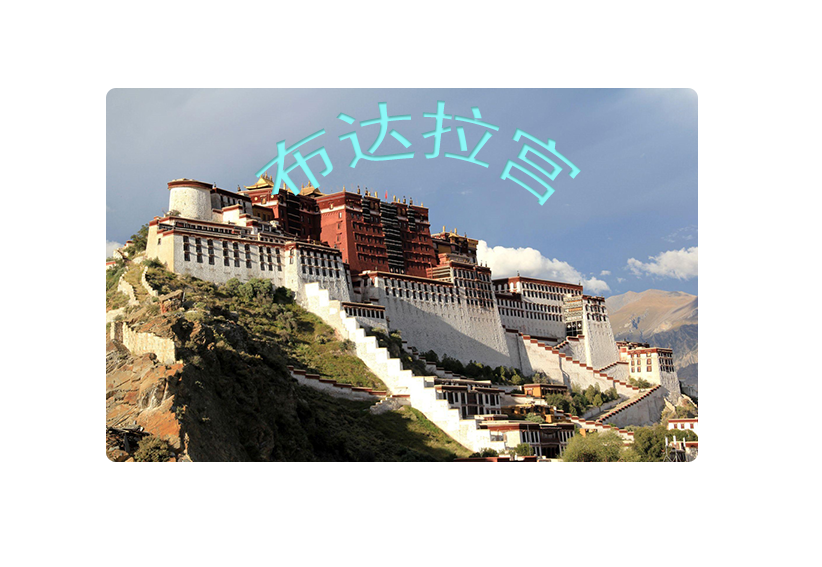
<style>
.page{position:relative;width:822px;height:567px;background:#ffffff}
.page>*{position:absolute;margin:0}
.t1{font:65px "SimHei";color:#8bf7f7}
</style>
<div class="page">
<p class="t1" style="left:254px;top:100px;width:328px;height:106px">布达拉宫</p>
</div>
